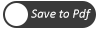
<style>
.page{position:relative;width:100px;height:30px;background:#3a3a3a}
.page>*{position:absolute;margin:0}
.t1{font:13px "Calibri-Italic";color:#ffffff}
</style>
<div class="page">
<p class="t1" style="left:31px;top:9px;width:60px;height:11px">Save to Pdf</p>
</div>
